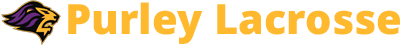
<style>
.page{position:relative;width:400px;height:45px;background:#ffffff}
.page>*{position:absolute;margin:0}
.t1{font:41.5px "OpenSans-Extrabold";color:#ffb92f}
</style>
<div class="page">
<p class="t1" style="left:68px;top:2px;width:332px;height:42px">Purley Lacrosse</p>
</div>
